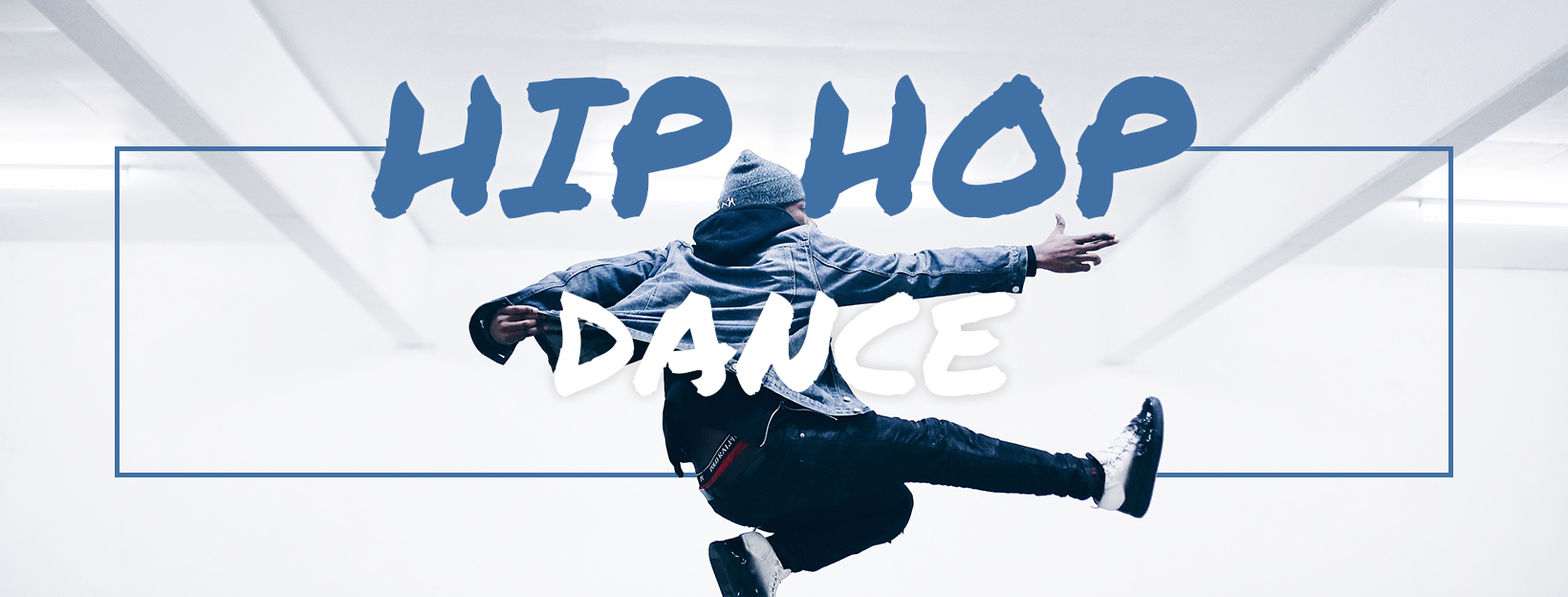
<style>
.page{position:relative;width:1568px;height:597px}
.page>*{position:absolute;margin:0}
.t1{font:191.2px "PermanentMarker";color:#4170a5}
.t2{font:143.4px "PermanentMarker";color:#ffffff}
</style>
<div class="page">
<p class="t1" style="left:371px;top:73px;width:826px;height:147px">HIP HOP</p>
<p class="t2" style="left:554px;top:290px;width:461px;height:107px">DANCE</p>
</div>
